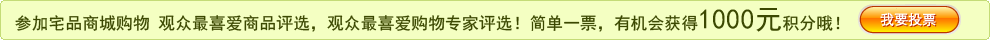
<style>
.page{position:relative;width:990px;height:40px;background:#f4ffc2}
.page>*{position:absolute;margin:0}
.t1{font:16.9px "SimHei";color:#3b4801}
.t2{font:28.1px "SimHei";color:#3b4801}
</style>
<div class="page">
<p class="t1" style="left:15px;top:8px;width:825px;height:24px">参加宅品商城购物 观众最喜爱商品评选，观众最喜爱购物专家评选！简单一票，有机会获得<span class="t2">1000元</span>积分哦！</p>
</div>
